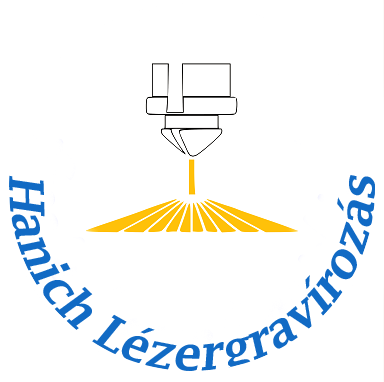
<style>
.page{position:relative;width:384px;height:382px;background:#ffffff}
.page>*{position:absolute;margin:0}
.t1{font:48px "LucidaFax-Demi";color:#116ac4;font-style:italic}
</style>
<div class="page">
<p class="t1" style="left:8px;top:175px;width:368px;height:201px">Hanich Lézergravírozás</p>
</div>
